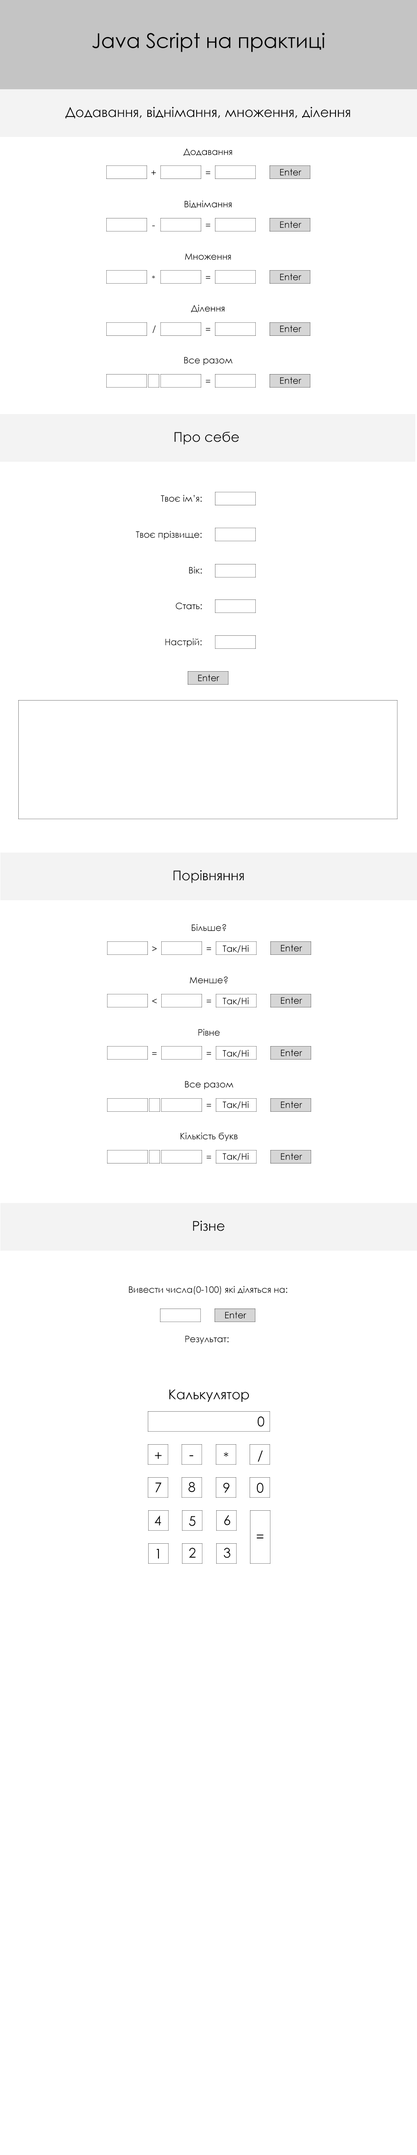
<style>
.page{position:relative;width:417px;height:2155px;background:#ffffff}
.page>*{position:absolute;margin:0}
.t1{font:20.4px "CenturyGothic";color:#000000}
.t2{font:13.4px "CenturyGothic";color:#000000}
.t3{font:9px "CenturyGothic";color:#000000}
</style>
<div class="page">
<p class="t1" style="left:92px;top:33px;width:233px;height:19px">Java Script на практиці</p>
<p class="t2" style="left:65px;top:107px;width:285px;height:12px">Додавання, віднімання, множення, ділення</p>
<p class="t3" style="left:183px;top:148px;width:49px;height:8px">Додавання</p>
<p class="t3" style="left:151px;top:170px;width:5px;height:5px">+</p>
<p class="t3" style="left:206px;top:171px;width:5px;height:3px">=</p>
<p class="t3" style="left:280px;top:169px;width:22px;height:7px">Enter</p>
<p class="t3" style="left:185px;top:200px;width:47px;height:8px">Віднімання</p>
<p class="t3" style="left:280px;top:221px;width:22px;height:7px">Enter</p>
<p class="t3" style="left:152px;top:225px;width:3px;height:1px">-</p>
<p class="t3" style="left:206px;top:224px;width:5px;height:3px">=</p>
<p class="t3" style="left:185px;top:253px;width:46px;height:7px">Множення</p>
<p class="t3" style="left:152px;top:275px;width:3px;height:4px">*</p>
<p class="t3" style="left:206px;top:276px;width:5px;height:3px">=</p>
<p class="t3" style="left:280px;top:273px;width:22px;height:7px">Enter</p>
<p class="t3" style="left:191px;top:305px;width:33px;height:8px">Ділення</p>
<p class="t3" style="left:152px;top:325px;width:4px;height:8px">/</p>
<p class="t3" style="left:206px;top:328px;width:5px;height:3px">=</p>
<p class="t3" style="left:280px;top:325px;width:22px;height:7px">Enter</p>
<p class="t3" style="left:184px;top:357px;width:49px;height:8px">Все разом</p>
<p class="t3" style="left:280px;top:377px;width:22px;height:7px">Enter</p>
<p class="t3" style="left:206px;top:380px;width:5px;height:3px">=</p>
<p class="t2" style="left:174px;top:431px;width:65px;height:14px">Про себе</p>
<p class="t3" style="left:161px;top:495px;width:41px;height:7px">Твоє ім’я:</p>
<p class="t3" style="left:136px;top:531px;width:66px;height:8px">Твоє прізвище:</p>
<p class="t3" style="left:189px;top:566px;width:13px;height:8px">Вік:</p>
<p class="t3" style="left:176px;top:602px;width:26px;height:7px">Стать:</p>
<p class="t3" style="left:165px;top:638px;width:37px;height:9px">Настрій:</p>
<p class="t3" style="left:198px;top:674px;width:22px;height:7px">Enter</p>
<p class="t2" style="left:174px;top:870px;width:70px;height:13px">Порівняння</p>
<p class="t3" style="left:192px;top:924px;width:34px;height:7px">Більше?</p>
<p class="t3" style="left:152px;top:946px;width:5px;height:5px">&gt;</p>
<p class="t3" style="left:207px;top:947px;width:4px;height:3px">=</p>
<p class="t3" style="left:223px;top:945px;width:26px;height:8px">Так/Ні</p>
<p class="t3" style="left:281px;top:944px;width:21px;height:7px">Enter</p>
<p class="t3" style="left:190px;top:976px;width:38px;height:7px">Менше?</p>
<p class="t3" style="left:152px;top:998px;width:5px;height:6px">&lt;</p>
<p class="t3" style="left:207px;top:999px;width:4px;height:3px">=</p>
<p class="t3" style="left:223px;top:997px;width:26px;height:8px">Так/Ні</p>
<p class="t3" style="left:281px;top:997px;width:21px;height:7px">Enter</p>
<p class="t3" style="left:198px;top:1028px;width:22px;height:8px">Рівне</p>
<p class="t3" style="left:223px;top:1050px;width:26px;height:7px">Так/Ні</p>
<p class="t3" style="left:281px;top:1049px;width:21px;height:7px">Enter</p>
<p class="t3" style="left:152px;top:1052px;width:5px;height:3px">=</p>
<p class="t3" style="left:207px;top:1052px;width:4px;height:2px">=</p>
<p class="t3" style="left:185px;top:1081px;width:48px;height:8px">Все разом</p>
<p class="t3" style="left:207px;top:1104px;width:4px;height:3px">=</p>
<p class="t3" style="left:223px;top:1101px;width:26px;height:8px">Так/Ні</p>
<p class="t3" style="left:281px;top:1101px;width:21px;height:7px">Enter</p>
<p class="t3" style="left:180px;top:1132px;width:58px;height:9px">Кількість букв</p>
<p class="t3" style="left:207px;top:1156px;width:4px;height:2px">=</p>
<p class="t3" style="left:223px;top:1153px;width:26px;height:7px">Так/Ні</p>
<p class="t3" style="left:281px;top:1153px;width:21px;height:7px">Enter</p>
<p class="t2" style="left:193px;top:1220px;width:31px;height:11px">Різне</p>
<p class="t3" style="left:129px;top:1285px;width:159px;height:9px">Вивести числа(0-100) які діляться на:</p>
<p class="t3" style="left:225px;top:1311px;width:22px;height:7px">Enter</p>
<p class="t3" style="left:185px;top:1335px;width:44px;height:9px">Результат:</p>
<p class="t2" style="left:169px;top:1389px;width:80px;height:13px">Калькулятор</p>
<p class="t2" style="left:258px;top:1416px;width:6px;height:10px">0</p>
<p class="t2" style="left:155px;top:1452px;width:7px;height:7px">+</p>
<p class="t2" style="left:189px;top:1455px;width:5px;height:1px">-</p>
<p class="t2" style="left:224px;top:1452px;width:5px;height:5px">*</p>
<p class="t2" style="left:258px;top:1450px;width:5px;height:11px">/</p>
<p class="t2" style="left:189px;top:1481px;width:6px;height:11px">8</p>
<p class="t2" style="left:156px;top:1482px;width:6px;height:10px">7</p>
<p class="t2" style="left:223px;top:1482px;width:7px;height:11px">9</p>
<p class="t2" style="left:257px;top:1482px;width:7px;height:11px">0</p>
<p class="t2" style="left:154px;top:1515px;width:7px;height:10px">4</p>
<p class="t2" style="left:189px;top:1516px;width:7px;height:10px">5</p>
<p class="t2" style="left:224px;top:1514px;width:7px;height:11px">6</p>
<p class="t2" style="left:257px;top:1534px;width:7px;height:4px">=</p>
<p class="t2" style="left:156px;top:1548px;width:3px;height:10px">1</p>
<p class="t2" style="left:189px;top:1547px;width:7px;height:11px">2</p>
<p class="t2" style="left:224px;top:1547px;width:7px;height:11px">3</p>
</div>
